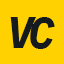
<style>
.page{position:relative;width:64px;height:64px;background:#ffd100}
.page>*{position:absolute;margin:0}
.t1{font:43.7px "IBMPlexMono-BoldItalic";letter-spacing:-0.1em;color:#151a1e;text-transform:uppercase}
</style>
<div class="page">
<p class="t1" style="left:10px;top:17px;width:45px;height:32px">vc</p>
</div>
